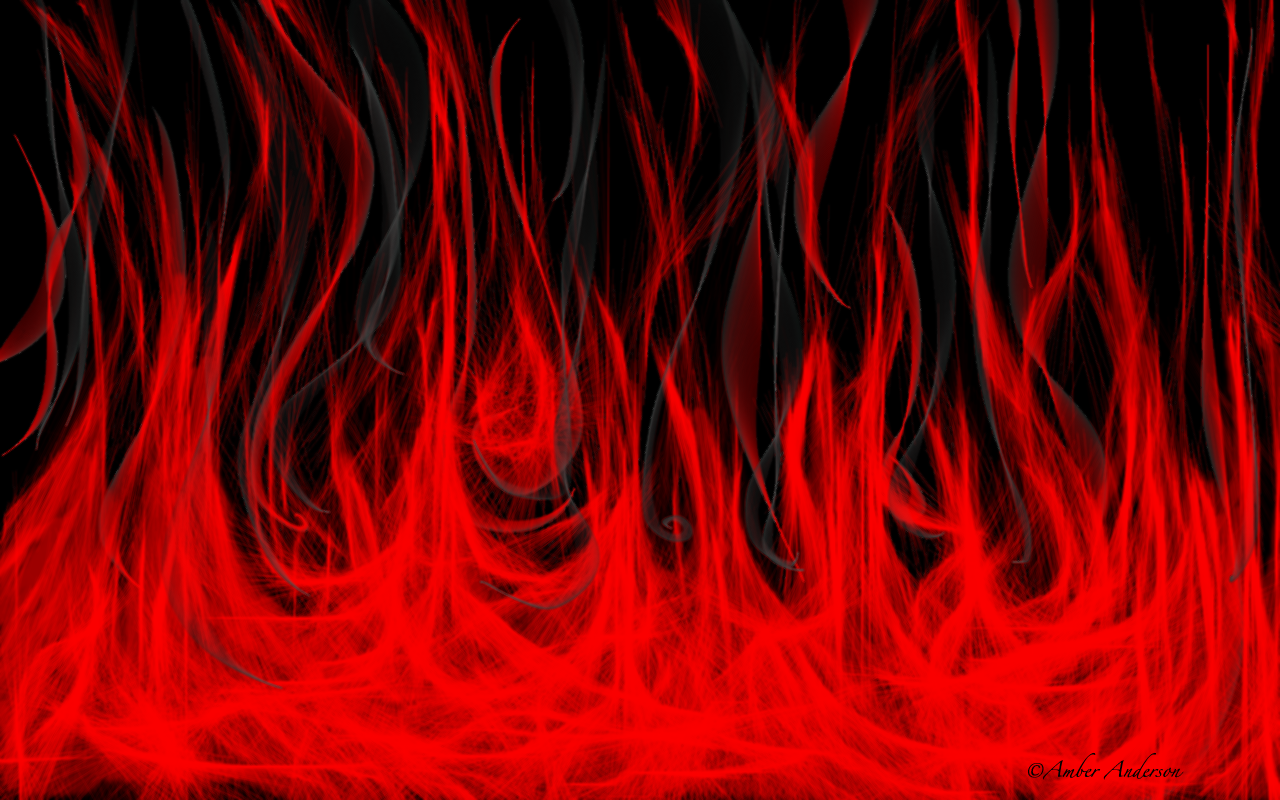
<style>
.page{position:relative;width:1280px;height:800px}
.page>*{position:absolute;margin:0}
.t1{font:14px "Zapfino";color:#010101}
.t2{font:12px "Zapfino";color:#010101}
</style>
<div class="page">
<p class="t1" style="left:1028px;top:752px;width:156px;height:28px;text-align:center"><span class="t2">©</span>Amber Anderson</p>
</div>
